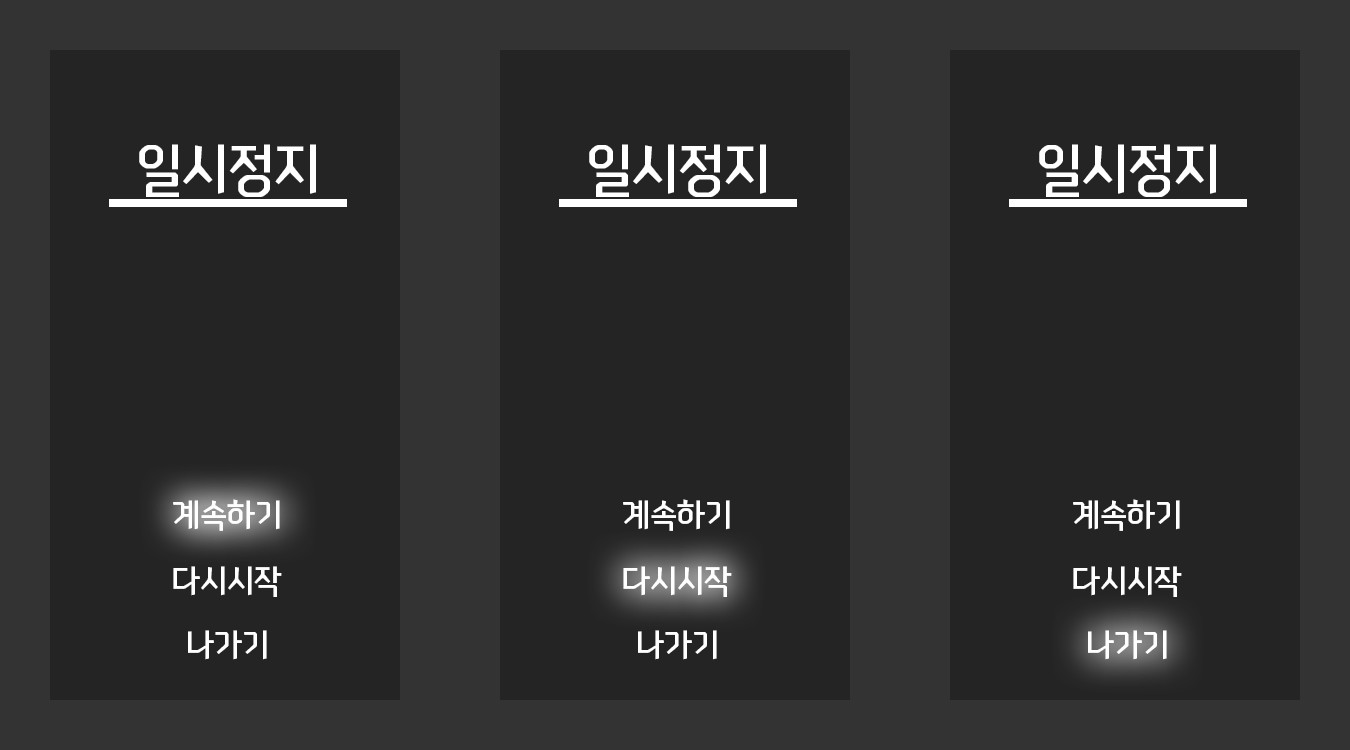
<style>
.page{position:relative;width:1350px;height:750px;background:#242424}
.page>*{position:absolute;margin:0}
.t1{font:57.6px "NEXONFootballGothicL";color:#ffffff}
.t2{font:33.6px "NEXONFootballGothicL";color:#ffffff}
</style>
<div class="page">
<p class="t1" style="left:139px;top:144px;width:177px;height:53px">일시정지</p>
<p class="t1" style="left:589px;top:144px;width:177px;height:53px">일시정지</p>
<p class="t1" style="left:1039px;top:144px;width:177px;height:53px">일시정지</p>
<p class="t2" style="left:173px;top:499px;width:107px;height:32px">계속하기</p>
<p class="t2" style="left:623px;top:499px;width:107px;height:32px">계속하기</p>
<p class="t2" style="left:1073px;top:499px;width:107px;height:32px">계속하기</p>
<p class="t2" style="left:173px;top:566px;width:109px;height:31px">다시시작</p>
<p class="t2" style="left:623px;top:566px;width:109px;height:31px">다시시작</p>
<p class="t2" style="left:1073px;top:566px;width:109px;height:31px">다시시작</p>
<p class="t2" style="left:188px;top:630px;width:79px;height:30px">나가기</p>
<p class="t2" style="left:638px;top:630px;width:79px;height:30px">나가기</p>
<p class="t2" style="left:1088px;top:630px;width:79px;height:30px">나가기</p>
</div>
